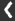
<style>
.page{position:relative;width:15px;height:21px;background:#333333}
.page>*{position:absolute;margin:0}
.t1{font:18px "AaarghNormal";color:#ffffff}
</style>
<div class="page">
<p class="t1" style="left:5px;top:2px;width:7px;height:15px">&lt;</p>
</div>
